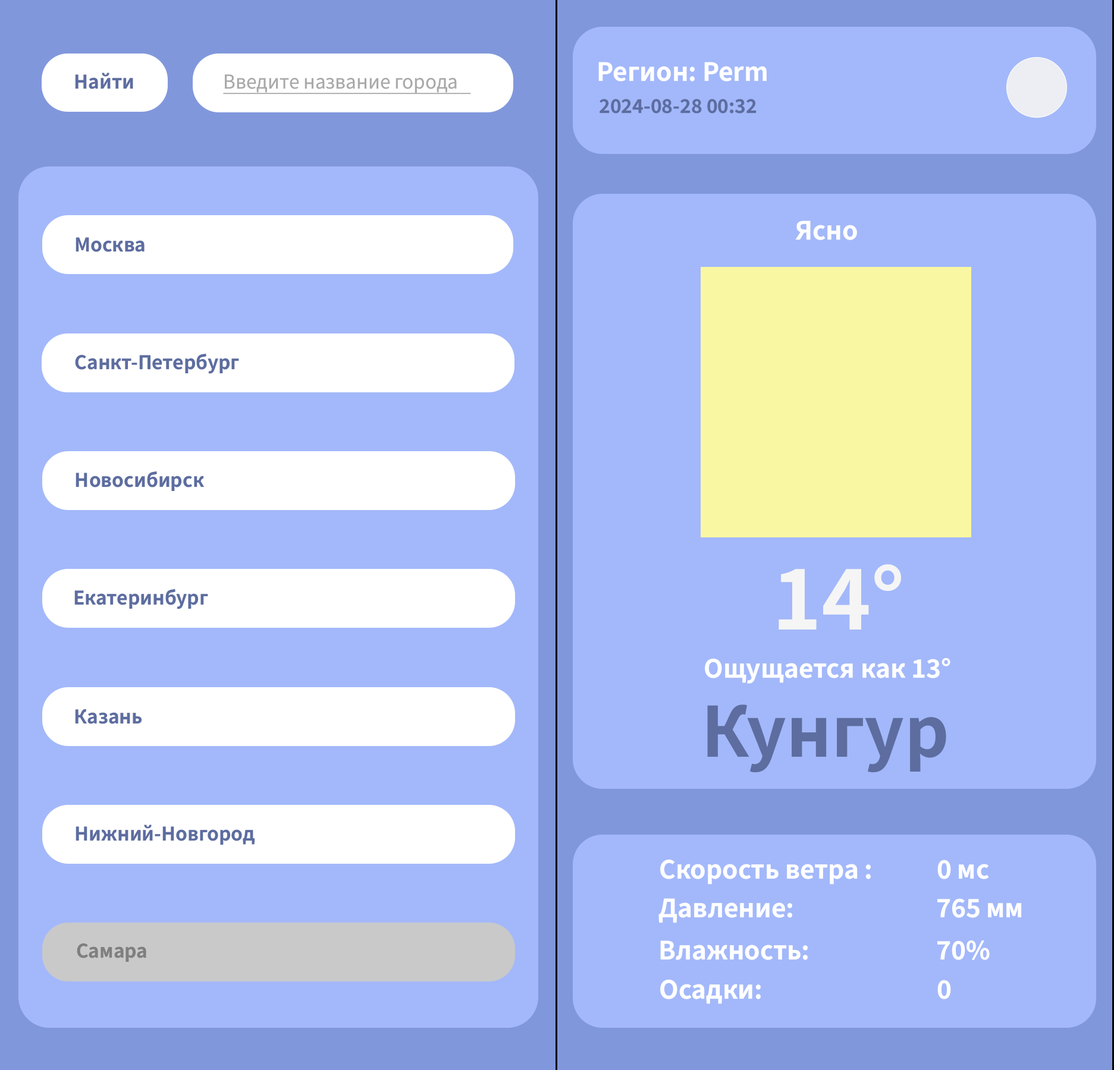
<style>
.page{position:relative;width:1114px;height:1070px;background:#a3b8fa}
.page>*{position:absolute;margin:0}
.t1{font:28.5px "SourceSansRoman_649.000wght";color:#ffffff;font-weight:bold}
.t2{font:21.4px "SourceSansRoman_649.000wght";color:#5d6da0;font-weight:bold}
.t3{font:21.4px "SourceSansRoman-Regular";color:#a9a9a9;font-weight:bold;text-decoration:underline}
.t4{font:95.2px "SourceSansRoman_649.000wght";color:#f5f5f5;font-weight:bold}
.t5{font:78.5px "SourceSansRoman_649.000wght";color:#5d6da0;font-weight:bold}
.t6{font:21.4px "SourceSansRoman_649.000wght";color:#7f7f7f;font-weight:bold}
</style>
<div class="page">
<p class="t1" style="left:598px;top:62px;width:169px;height:19px">Регион: Perm</p>
<p class="t2" style="left:75px;top:73px;width:58px;height:16px">Найти</p>
<p class="t3" style="left:223px;top:74px;width:248px;height:21px">Введите название города</p>
<p class="t2" style="left:599px;top:99px;width:157px;height:15px">2024-08-28 00:32</p>
<p class="t1" style="left:795px;top:221px;width:62px;height:19px">Ясно</p>
<p class="t2" style="left:76px;top:237px;width:69px;height:15px">Москва</p>
<p class="t2" style="left:75px;top:353px;width:164px;height:21px">Санкт-Петербург</p>
<p class="t2" style="left:76px;top:471px;width:128px;height:20px">Новосибирск</p>
<p class="t4" style="left:778px;top:564px;width:124px;height:66px">14°</p>
<p class="t2" style="left:74px;top:589px;width:134px;height:21px">Екатеринбург</p>
<p class="t1" style="left:705px;top:658px;width:245px;height:26px">Ощущается как 13°</p>
<p class="t2" style="left:75px;top:709px;width:67px;height:15px">Казань</p>
<p class="t5" style="left:707px;top:705px;width:239px;height:68px">Кунгур</p>
<p class="t2" style="left:76px;top:825px;width:179px;height:20px">Нижний-Новгород</p>
<p class="t1" style="left:660px;top:860px;width:329px;height:25px">Скорость ветра :    0 мс</p>
<p class="t1" style="left:658px;top:899px;width:364px;height:25px">Давление:       765 мм</p>
<p class="t1" style="left:660px;top:941px;width:330px;height:19px">Влажность:       70%</p>
<p class="t6" style="left:77px;top:944px;width:69px;height:18px">Самара</p>
<p class="t1" style="left:660px;top:980px;width:291px;height:24px">Осадки:        0</p>
</div>
